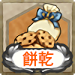
<style>
.page{position:relative;width:75px;height:75px}
.page>*{position:absolute;margin:0}
.t1{font:16px "GothicMB101Pr6N-Medium";color:#ff5a00}
</style>
<div class="page">
<p class="t1" style="left:22px;top:51px;width:32px;height:16px">餅乾</p>
</div>
